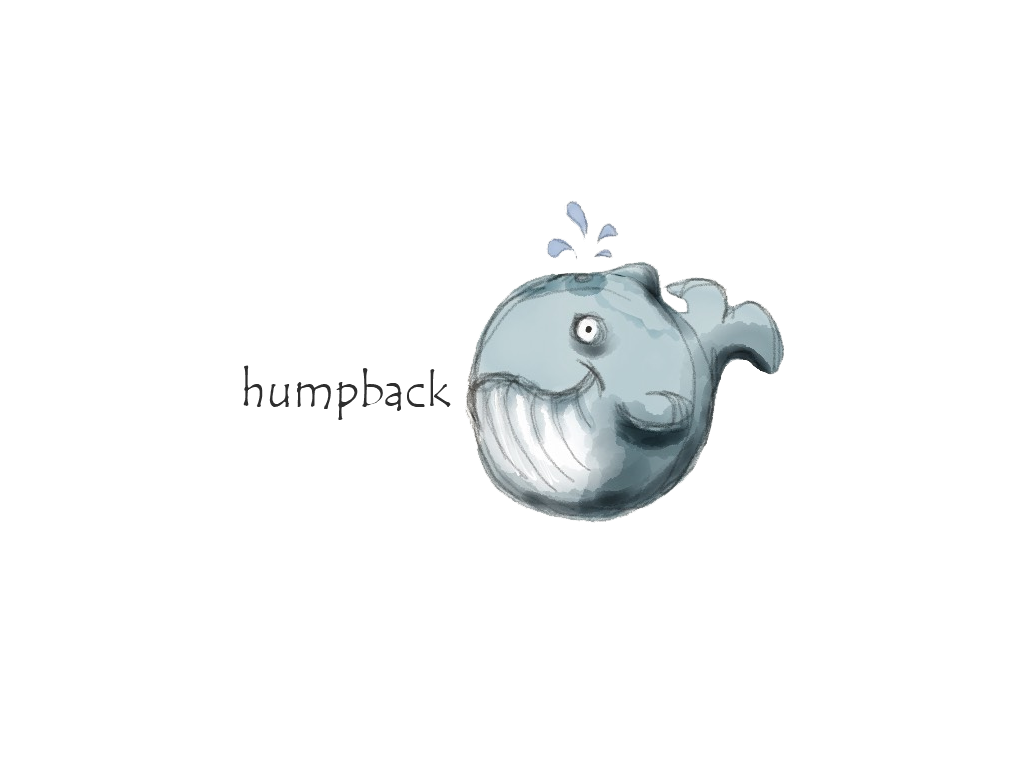
<style>
.page{position:relative;width:1024px;height:768px;background:#ffffff}
.page>*{position:absolute;margin:0}
.t1{font:48px "TempusSansITC";color:#2e2e2e}
</style>
<div class="page">
<p class="t1" style="left:243px;top:365px;width:208px;height:55px">humpback</p>
</div>
